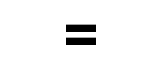
<style>
.page{position:relative;width:160px;height:75px;background:#ffffff}
.page>*{position:absolute;margin:0}
.t1{font:60px "ArialRoundedMTBold";color:#000000}
</style>
<div class="page">
<p class="t1" style="left:66px;top:24px;width:30px;height:21px">=</p>
</div>
